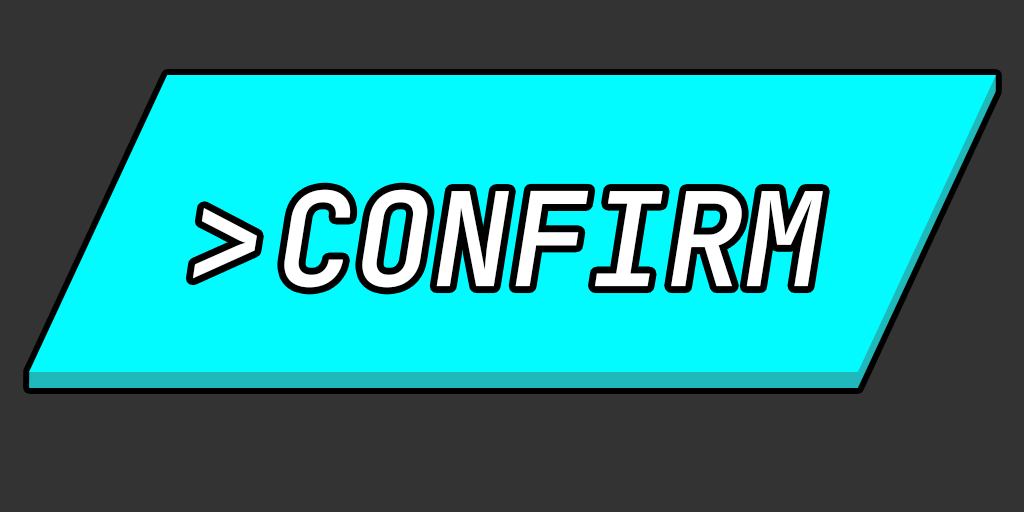
<style>
.page{position:relative;width:1024px;height:512px;background:#333333}
.page>*{position:absolute;margin:0}
.t1{font:130px "JetBrainsMonoItalic-MediumItalic";color:#ffffff}
</style>
<div class="page">
<p class="t1" style="left:192px;top:189px;width:631px;height:99px">CONFIRM</p>
</div>
